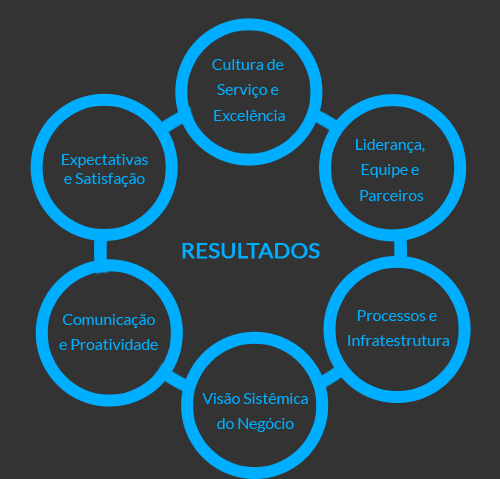
<style>
.page{position:relative;width:500px;height:479px;background:#333333}
.page>*{position:absolute;margin:0}
.t1{font:15.7px/25.4px "Lato-Regular";color:#00aeff}
.t2{font:15.7px "Lato-Regular";color:#00aeff}
.t3{font:21.6px "Lato-Regular";color:#00aeff;font-weight:bold}
</style>
<div class="page">
<p class="t1" style="left:212px;top:59px;width:73px;height:62px;text-align:center">Cultura de <br>Serviço e <br>Excelência</p>
<p class="t1" style="left:356px;top:139px;width:69px;height:62px;text-align:center">Liderança, <br>Equipe e <br>Parceiros</p>
<p class="t2" style="left:62px;top:154px;width:86px;height:33px;text-align:center">Expectativas<br>e Satisfação</p>
<p class="t3" style="left:182px;top:243px;width:138px;height:16px">RESULTADOS</p>
<p class="t1" style="left:59px;top:314px;width:99px;height:36px;text-align:center">Comunicação<br>e Proatividade</p>
<p class="t1" style="left:348px;top:310px;width:101px;height:36px;text-align:center">Processos e <br>Infratestrutura</p>
<p class="t1" style="left:202px;top:393px;width:106px;height:39px;text-align:center">Visão Sistêmica<br>do Negócio</p>
</div>
